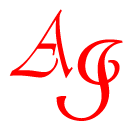
<style>
.page{position:relative;width:128px;height:128px;background:#ffffff}
.page>*{position:absolute;margin:0}
.t1{font:93.4px "Vivaldii";color:#ff0000;scale:0.75 1}
.t2{font:131.9px "FrenchScriptMT";color:#ff0000;scale:0.92 1}
</style>
<div class="page">
<p class="t1" style="left:9px;top:9px;width:64px;height:70px">A</p>
<p class="t2" style="left:56px;top:39px;width:67px;height:82px;rotate:11deg">I</p>
</div>
